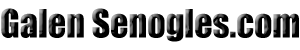
<style>
.page{position:relative;width:300px;height:50px;background:#ffffff}
.page>*{position:absolute;margin:0}
.t1{font:36px "Impact";color:#000000}
</style>
<div class="page">
<p class="t1" style="left:1px;top:8px;width:298px;height:34px">Galen Senogles.com</p>
</div>
